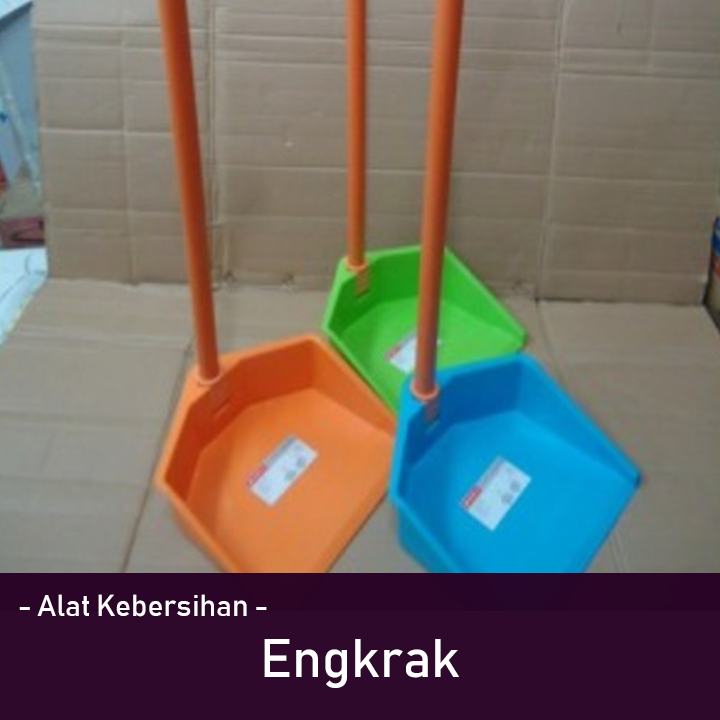
<style>
.page{position:relative;width:720px;height:720px}
.page>*{position:absolute;margin:0}
.t1{font:30px "Bahnschrift";color:#ffffff}
.t2{font:53.6px "Bahnschrift";color:#ffffff}
</style>
<div class="page">
<p class="t1" style="left:19px;top:594px;width:248px;height:23px">- Alat Kebersihan -</p>
<p class="t2" style="left:264px;top:639px;width:195px;height:49px">Engkrak</p>
</div>
